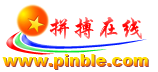
<style>
.page{position:relative;width:158px;height:72px;background:#ffffff}
.page>*{position:absolute;margin:0}
.t1{font:24.1px "STXingkai"}
.t2{font:16px "Arial-Black"}
</style>
<div class="page">
<p class="t1" style="left:49px;top:17px;width:93px;height:23px">拼搏在线</p>
<p class="t2" style="left:2px;top:54px;width:146px;height:15px">www.pinble.com</p>
</div>
